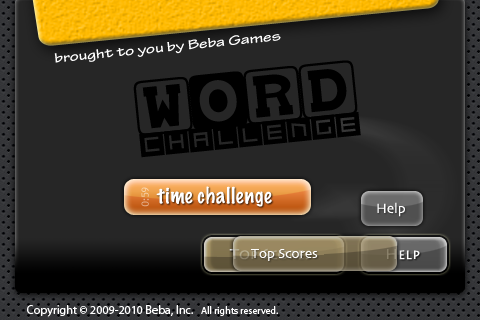
<style>
.page{position:relative;width:480px;height:320px;background:#262626}
.page>*{position:absolute;margin:0}
.t1{font:14px "TektonPro-BoldExt";color:#ffffff}
.t2{font:10px "TrebuchetMS";color:#f0c39c}
.t3{font:20px "MarkerFelt-Thin";color:#ffffff}
.t4{font:14px "Skia-Regular";color:#ffffff}
.t5{font:14px "LithosPro-Regular";color:#ffffff}
.t6{font:12px "MyriadPro-Regular";color:#ffffff}
.t7{font:10px "MyriadPro-Regular";color:#ffffff}
</style>
<div class="page">
<p class="t1" style="left:54px;top:34px;width:227px;height:29px;rotate:-6deg">brought to you by Beba Games</p>
<p class="t2" style="left:141px;top:187px;width:8px;height:20px;rotate:-90deg">0:59</p>
<p class="t3" style="left:156px;top:186px;width:116px;height:21px">time challenge</p>
<p class="t4" style="left:377px;top:202px;width:28px;height:15px">Help</p>
<p class="t4" style="left:251px;top:249px;width:67px;height:12px">Top Scores</p>
<p class="t5" style="left:387px;top:249px;width:33px;height:11px">Help</p>
<p class="t6" style="left:27px;top:305px;width:166px;height:12px">Copyright © 2009-2010 Beba, Inc.</p>
<p class="t7" style="left:201px;top:306px;width:77px;height:10px">All rights reserved.</p>
</div>
